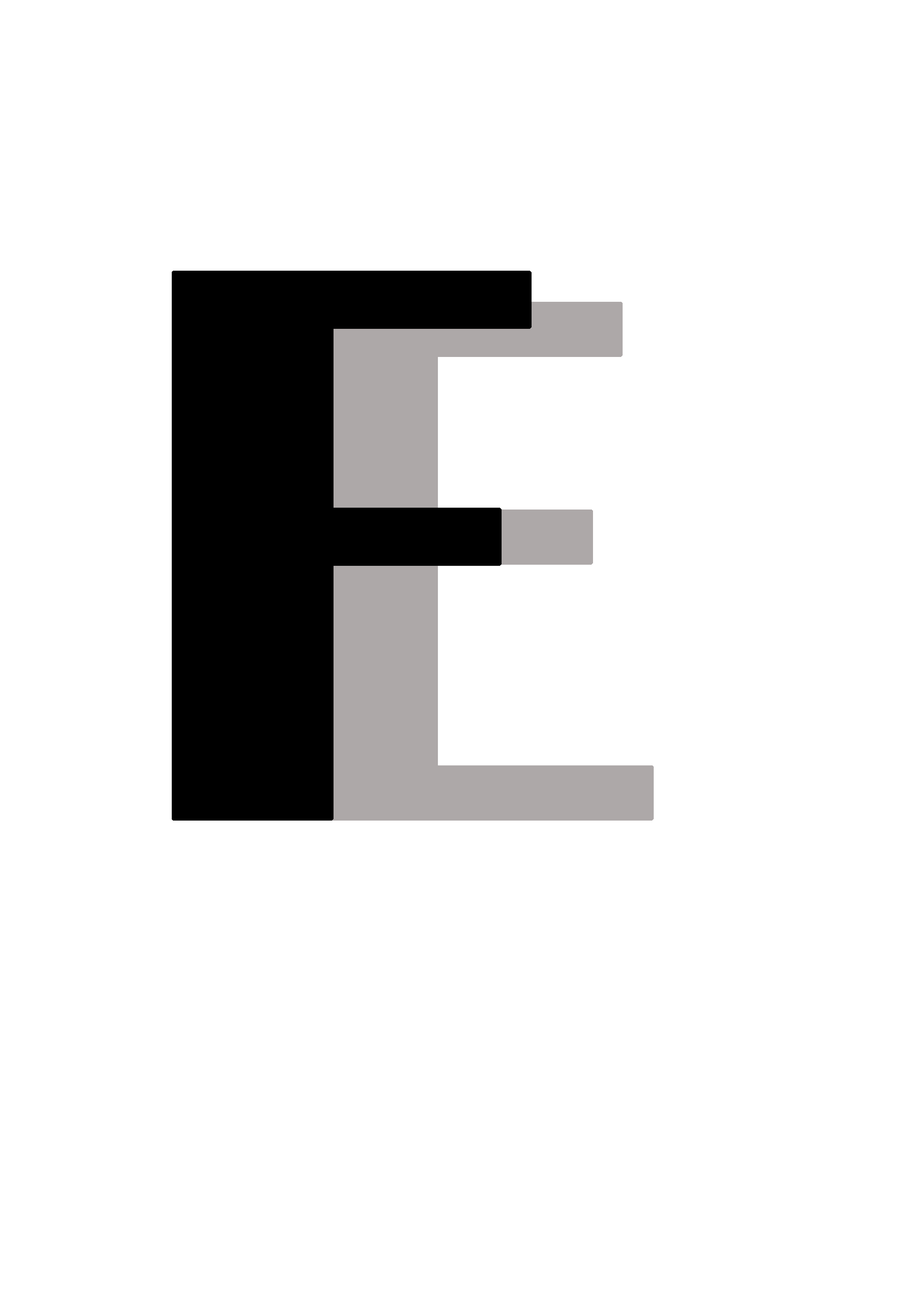
<style>
.page{position:relative;width:918px;height:1299px;background:#ffffff}
.page>*{position:absolute;margin:0}
.t1{font:819.9px "BritannicBold";color:#000000;font-weight:bold}
.t2{font:773.1px "BritannicBold";color:#ada8a8;font-weight:bold}
</style>
<div class="page">
<p class="t1" style="left:172px;top:271px;width:360px;height:549px">F</p>
<p class="t2" style="left:285px;top:302px;width:369px;height:518px">E</p>
</div>
